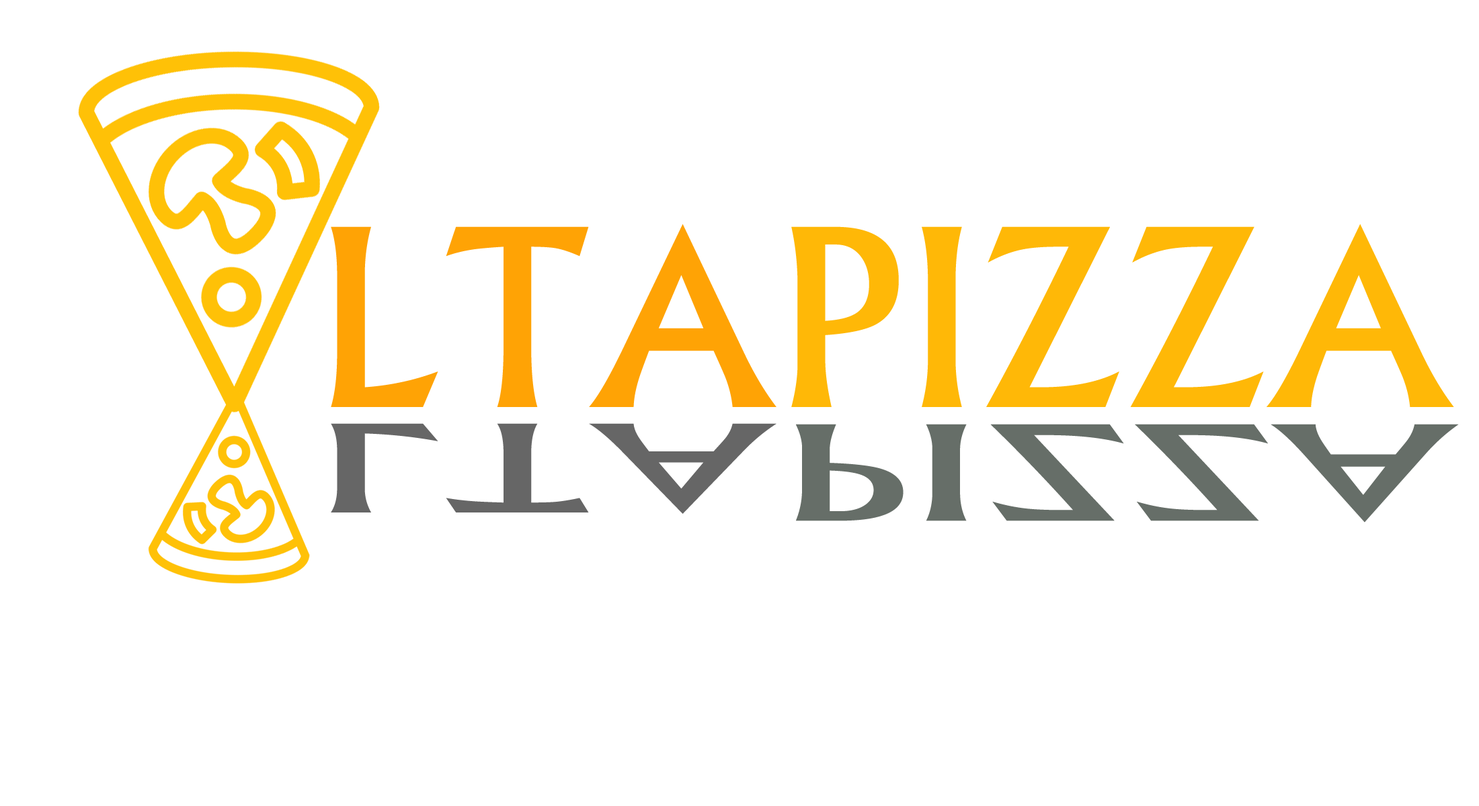
<style>
.page{position:relative;width:1479px;height:806px;background:#ffffff}
.page>*{position:absolute;margin:0}
.t1{font:262.1px "Narkisim";color:#ffa305}
.t2{font:262.1px "Narkisim";color:#ffb807}
.t3{font:129px "Narkisim";color:#666666;scale:2.03 1}
.t4{font:139.9px "Narkisim";color:#666e68;scale:1.87 1}
</style>
<div class="page">
<p class="t1" style="left:331px;top:224px;width:445px;height:183px">LTA</p>
<p class="t2" style="left:791px;top:224px;width:663px;height:183px">PIZZA</p>
<p class="t3" style="left:331px;top:423px;width:445px;height:91px">LTA</p>
<p class="t4" style="left:796px;top:424px;width:662px;height:99px">PIZZA</p>
</div>
